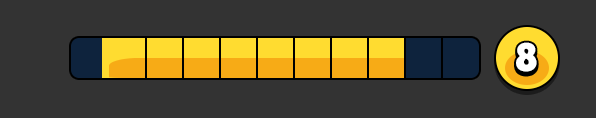
<style>
.page{position:relative;width:596px;height:118px;background:#333333}
.page>*{position:absolute;margin:0}
.t1{font:40px "LilitaOne";color:#ffffff;text-transform:uppercase}
</style>
<div class="page">
<p class="t1" style="left:516px;top:42px;width:21px;height:30px">8</p>
</div>
